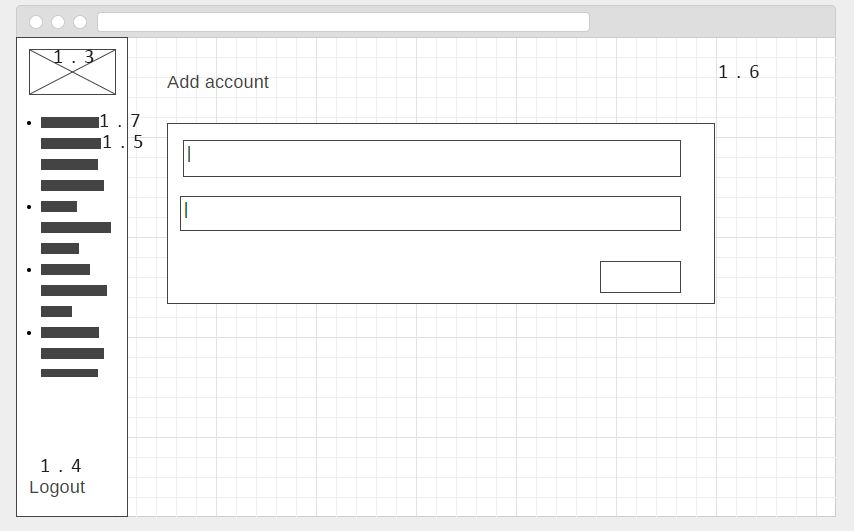
<style>
.page{position:relative;width:854px;height:531px;background:#ffffff}
.page>*{position:absolute;margin:0}
.t1{font:20.1px "Calibri";letter-spacing:0.4em;color:#231f20}
</style>
<div class="page">
<p class="t1" style="left:54px;top:50px;width:40px;height:13px">1.3</p>
<p class="t1" style="left:719px;top:65px;width:40px;height:13px">1.6</p>
<p class="t1" style="left:100px;top:114px;width:40px;height:13px">1.7</p>
<p class="t1" style="left:103px;top:135px;width:40px;height:13px">1.5</p>
<p class="t1" style="left:41px;top:459px;width:40px;height:13px">1.4</p>
</div>
